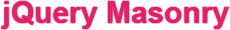
<style>
.page{position:relative;width:230px;height:30px;background:#ffffff}
.page>*{position:absolute;margin:0}
.t1{font:30px "Arial-BoldMT";color:#dd2266}
</style>
<div class="page">
<p class="t1" style="left:1px;top:1px;width:228px;height:28px">jQuery Masonry</p>
</div>
